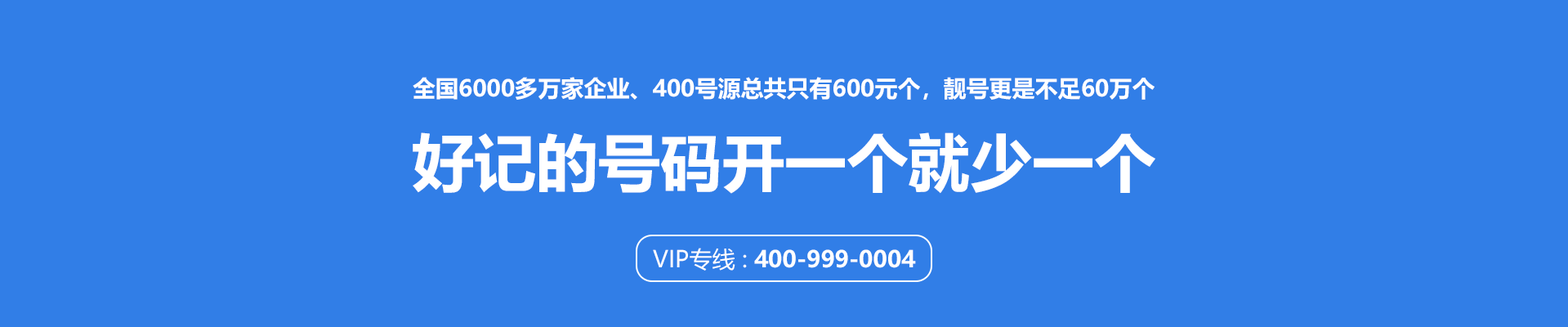
<style>
.page{position:relative;width:1568px;height:327px;background:#317ee7}
.page>*{position:absolute;margin:0}
.t1{font:22.9px "MicrosoftYaHei-Bold";color:#ffffff;text-transform:uppercase}
.t2{font:62px "MicrosoftYaHei-Bold";color:#ffffff;text-transform:uppercase}
.t3{font:22.9px "MicrosoftYaHei";color:#ffffff;text-transform:uppercase}
</style>
<div class="page">
<p class="t1" style="left:413px;top:77px;width:742px;height:23px">全国6000多万家企业、400号源总共只有600元个，靓号更是不足60万个</p>
<p class="t2" style="left:413px;top:132px;width:742px;height:62px">好记的号码开一个就少一个</p>
<p class="t1" style="left:653px;top:248px;width:263px;height:22px"><span class="t3">VIP专线 : </span>400-999-0004</p>
</div>
